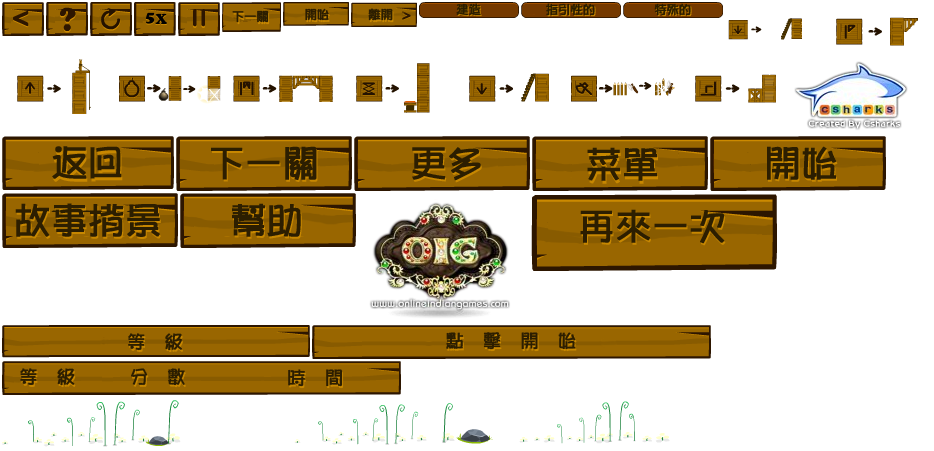
<style>
.page{position:relative;width:934px;height:451px;background:#ffffff}
.page>*{position:absolute;margin:0}
.t1{font:12px "Pop2EG-Bold-T-GB";color:#2c1e00;font-weight:bold}
.t2{font:12px "Pop2EG-Bold-T-GB";font-weight:bold}
.t3{font:36px "Pop2EG-Bold-T-GB";color:#2c1e00;font-weight:bold}
.t4{font:36px "Pop2EG-Bold-T-GB";font-weight:bold}
.t5{font:18px "Pop2EG-Bold-T-GB";color:#2c1e00;font-weight:bold}
.t6{font:18px "Pop2EG-Bold-T-GB";font-weight:bold}
</style>
<div class="page">
<p class="t1" style="left:456px;top:3px;width:25px;height:13px">建造</p>
<p class="t1" style="left:546px;top:3px;width:49px;height:13px">指引性的</p>
<p class="t2" style="left:547px;top:4px;width:49px;height:13px">指引性的</p>
<p class="t1" style="left:654px;top:3px;width:37px;height:13px">特殊的</p>
<p class="t2" style="left:655px;top:4px;width:37px;height:13px">特殊的</p>
<p class="t1" style="left:232px;top:10px;width:37px;height:13px">下一关</p>
<p class="t1" style="left:305px;top:8px;width:24px;height:13px">开始</p>
<p class="t1" style="left:368px;top:8px;width:25px;height:13px">离开</p>
<p class="t3" style="left:52px;top:146px;width:70px;height:33px">返回</p>
<p class="t3" style="left:211px;top:146px;width:106px;height:34px">下一关</p>
<p class="t4" style="left:212px;top:148px;width:106px;height:34px">下一关</p>
<p class="t3" style="left:412px;top:147px;width:69px;height:34px">更多</p>
<p class="t3" style="left:587px;top:147px;width:70px;height:34px">菜单</p>
<p class="t3" style="left:767px;top:146px;width:70px;height:34px">开始</p>
<p class="t3" style="left:15px;top:203px;width:145px;height:34px">故事背景</p>
<p class="t3" style="left:232px;top:203px;width:69px;height:34px">帮助</p>
<p class="t3" style="left:580px;top:209px;width:145px;height:35px">再来一次</p>
<p class="t5" style="left:128px;top:333px;width:54px;height:18px">等  级</p>
<p class="t5" style="left:446px;top:332px;width:130px;height:18px">点  击  开  始</p>
<p class="t6" style="left:447px;top:334px;width:130px;height:18px">点  击  开  始</p>
<p class="t5" style="left:20px;top:368px;width:55px;height:18px">等  级</p>
<p class="t5" style="left:131px;top:368px;width:54px;height:18px">分  数</p>
<p class="t5" style="left:288px;top:369px;width:55px;height:18px">时  间</p>
</div>
